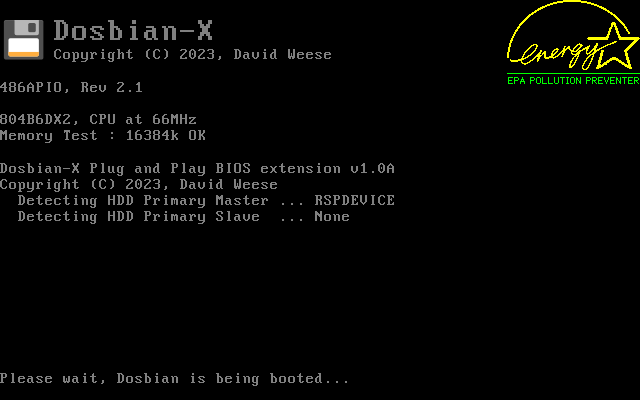
<style>
.page{position:relative;width:640px;height:400px;background:#000000}
.page>*{position:absolute;margin:0}
.t1{font:32px "PerfectDOSVGA437";color:#808080}
.t2{font:16px "PerfectDOSVGA437";color:#808080}
</style>
<div class="page">
<p class="t1" style="left:54px;top:20px;width:158px;height:20px">Dosbian-X</p>
<p class="t2" style="left:0px;top:49px;width:394px;height:337px">Copyright (C) 2023, David Weese<br><br>486APIO, Rev 2.1<br><br>804B6DX2, CPU at 66MHz<br>Memory Test : 16384k OK<br><br>Dosbian-X Plug and Play BIOS extension v1.0A<br>Copyright (C) 2023, David Weese<br>  Detecting HDD Primary Master ... RSPDEVICE<br>  Detecting HDD Primary Slave  ... None<br><br><br><br><br><br><br><br><br><br>Please wait, Dosbian is being booted...</p>
</div>
